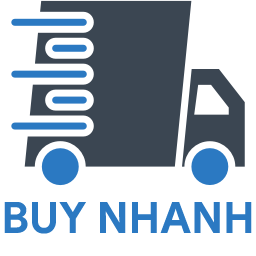
<style>
.page{position:relative;width:256px;height:256px;background:#ffffff}
.page>*{position:absolute;margin:0}
.t1{font:43px "GoogleSans-Bold";color:#2b79c2}
</style>
<div class="page">
<p class="t1" style="left:4px;top:202px;width:248px;height:32px">BUY NHANH</p>
</div>
